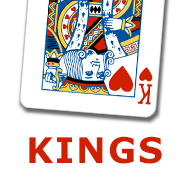
<style>
.page{position:relative;width:190px;height:190px;background:#ffffff}
.page>*{position:absolute;margin:0}
.t1{font:35.4px "Verdana-Bold";letter-spacing:0.05em;color:#d02000}
</style>
<div class="page">
<p class="t1" style="left:29px;top:136px;width:133px;height:28px">KINGS</p>
</div>
